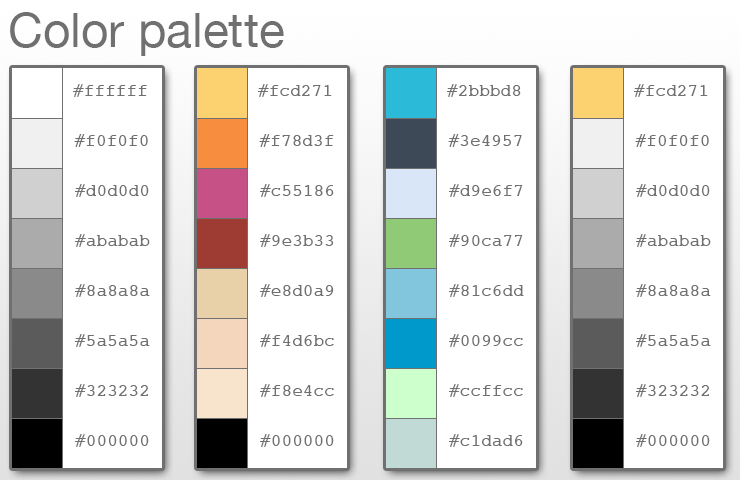
<style>
.page{position:relative;width:740px;height:480px;background:#ffffff}
.page>*{position:absolute;margin:0}
.t1{font:48px "HelveticaNeue";color:#707070}
.t2{font:17.5px "Courier";color:#707070}
.t3{font:17.9px "Courier";color:#707070}
</style>
<div class="page">
<p class="t1" style="left:10px;top:12px;width:274px;height:44px">Color palette</p>
<p class="t2" style="left:73px;top:84px;width:74px;height:13px">#ffffff</p>
<p class="t2" style="left:258px;top:84px;width:74px;height:13px">#fcd271</p>
<p class="t2" style="left:447px;top:84px;width:74px;height:13px">#2bbbd8</p>
<p class="t2" style="left:634px;top:84px;width:74px;height:13px">#fcd271</p>
<p class="t3" style="left:74px;top:134px;width:74px;height:13px">#f0f0f0</p>
<p class="t3" style="left:259px;top:134px;width:75px;height:13px">#f78d3f</p>
<p class="t3" style="left:448px;top:134px;width:74px;height:13px">#3e4957</p>
<p class="t3" style="left:635px;top:134px;width:74px;height:13px">#f0f0f0</p>
<p class="t2" style="left:75px;top:184px;width:74px;height:13px">#d0d0d0</p>
<p class="t2" style="left:260px;top:184px;width:74px;height:13px">#c55186</p>
<p class="t2" style="left:449px;top:184px;width:74px;height:13px">#d9e6f7</p>
<p class="t2" style="left:636px;top:184px;width:74px;height:13px">#d0d0d0</p>
<p class="t2" style="left:75px;top:234px;width:75px;height:13px">#ababab</p>
<p class="t2" style="left:260px;top:234px;width:74px;height:13px">#9e3b33</p>
<p class="t2" style="left:449px;top:234px;width:74px;height:13px">#90ca77</p>
<p class="t2" style="left:636px;top:234px;width:75px;height:13px">#ababab</p>
<p class="t2" style="left:75px;top:284px;width:75px;height:13px">#8a8a8a</p>
<p class="t2" style="left:260px;top:284px;width:74px;height:13px">#e8d0a9</p>
<p class="t2" style="left:449px;top:284px;width:75px;height:13px">#81c6dd</p>
<p class="t2" style="left:636px;top:284px;width:75px;height:13px">#8a8a8a</p>
<p class="t2" style="left:75px;top:334px;width:75px;height:13px">#5a5a5a</p>
<p class="t2" style="left:260px;top:334px;width:74px;height:13px">#f4d6bc</p>
<p class="t2" style="left:449px;top:334px;width:74px;height:13px">#0099cc</p>
<p class="t2" style="left:636px;top:334px;width:75px;height:13px">#5a5a5a</p>
<p class="t2" style="left:75px;top:384px;width:73px;height:13px">#323232</p>
<p class="t2" style="left:260px;top:384px;width:74px;height:13px">#f8e4cc</p>
<p class="t2" style="left:449px;top:384px;width:74px;height:13px">#ccffcc</p>
<p class="t2" style="left:636px;top:384px;width:73px;height:13px">#323232</p>
<p class="t2" style="left:75px;top:434px;width:74px;height:13px">#000000</p>
<p class="t2" style="left:260px;top:434px;width:74px;height:13px">#000000</p>
<p class="t2" style="left:449px;top:434px;width:74px;height:13px">#c1dad6</p>
<p class="t2" style="left:636px;top:434px;width:74px;height:13px">#000000</p>
</div>
